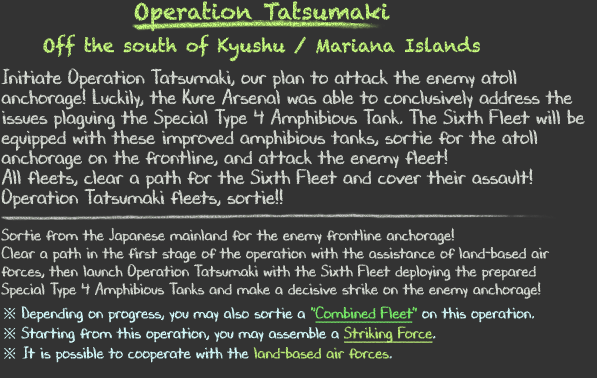
<style>
.page{position:relative;width:597px;height:378px;background:#333333}
.page>*{position:absolute;margin:0}
.t1{font:18px/36px "Chalkduster"}
.t2{font:22px/36px "Chalkduster"}
.t3{font:20px/20px "DJBChalkItUp";color:#d9ded6}
.t4{font:16px/18px "DJBChalkItUp";color:#d9ded6}
.t5{font:16px/24px "DJBChalkItUp";color:#d9ded6}
.t6{font:16px/20px "TimesNewRomanPSMT";color:#d7feff}
.t7{font:16px/20px "DJBChalkItUp";color:#d7feff}
.t8{font:16px/20px "DJBChalkItUp";color:#7bf26b}
.t9{font:16px/20px "DJBChalkItUp";color:#7bf26b;text-decoration:underline}
.t10{font:16px/16px "TimesNewRomanPSMT";color:#d7feff}
.t11{font:16px/16px "DJBChalkItUp";color:#d7feff}
.t12{font:16px/20px "DJBChalkItUp";color:#bdef78;text-decoration:underline}
.t13{font:16px/16px "DJBChalkItUp";color:#bdef78}
</style>
<div class="page">
<p class="t1" style="left:43px;top:1px;width:437px;height:61px;text-align:center"><span class="t2">Operation Tatsumaki<br></span>Off the south of Kyushu / Mariana Islands</p>
<p class="t3" style="left:1px;top:68px;width:584px;height:295px">Initiate Operation Tatsumaki, our plan to attack the enemy atoll<br>anchorage! Luckily, the Kure Arsenal was able to conclusively address the<br>issues plaguing the Special Type 4 Amphibious Tank. The Sixth Fleet will be<br>equipped with these improved amphibious tanks, sortie for the atoll<br>anchorage on the frontline, and attack the enemy fleet!<br>All fleets, clear a path for the Sixth Fleet and cover their assault!<br>Operation Tatsumaki fleets, sortie!!<br><br><span class="t4">Sortie from the Japanese mainland for the enemy frontline anchorage!<br>Clear a path in the first stage of the operation with the assistance of land-based air<br>forces, then launch Operation Tatsumaki with the Sixth Fleet deploying the prepared<br>Special Type 4 Amphibious Tanks and make a decisive strike on the enemy anchorage</span><span class="t5">!<br></span><span class="t6">※ </span><span class="t7">Depending on progress, you may also sortie a </span><span class="t8">"</span><span class="t9">Combined Fleet</span><span class="t8">"</span><span class="t7"> on this operation.<br></span><span class="t10">※ </span><span class="t11">Starting from this operation, you may assemble a </span><span class="t12">Striking Force</span><span class="t7">.<br></span><span class="t6">※ </span><span class="t11">It is possible to cooperate with the </span><span class="t13">land-based air forces</span><span class="t11">.</span></p>
</div>
